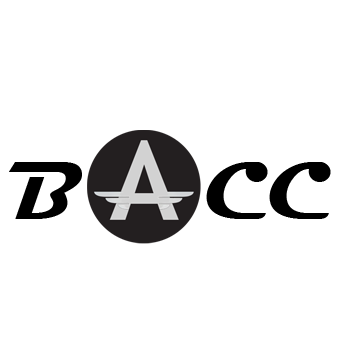
<style>
.page{position:relative;width:350px;height:350px;background:#ffffff}
.page>*{position:absolute;margin:0}
.t1{font:83.3px "Magneto-Bold";color:#000000}
.t2{font:95.8px "ArialRoundedMTBold";color:#000000}
</style>
<div class="page">
<p class="t1" style="left:9px;top:162px;width:322px;height:57px"><span class="t2">    </span>B    CC</p>
</div>
